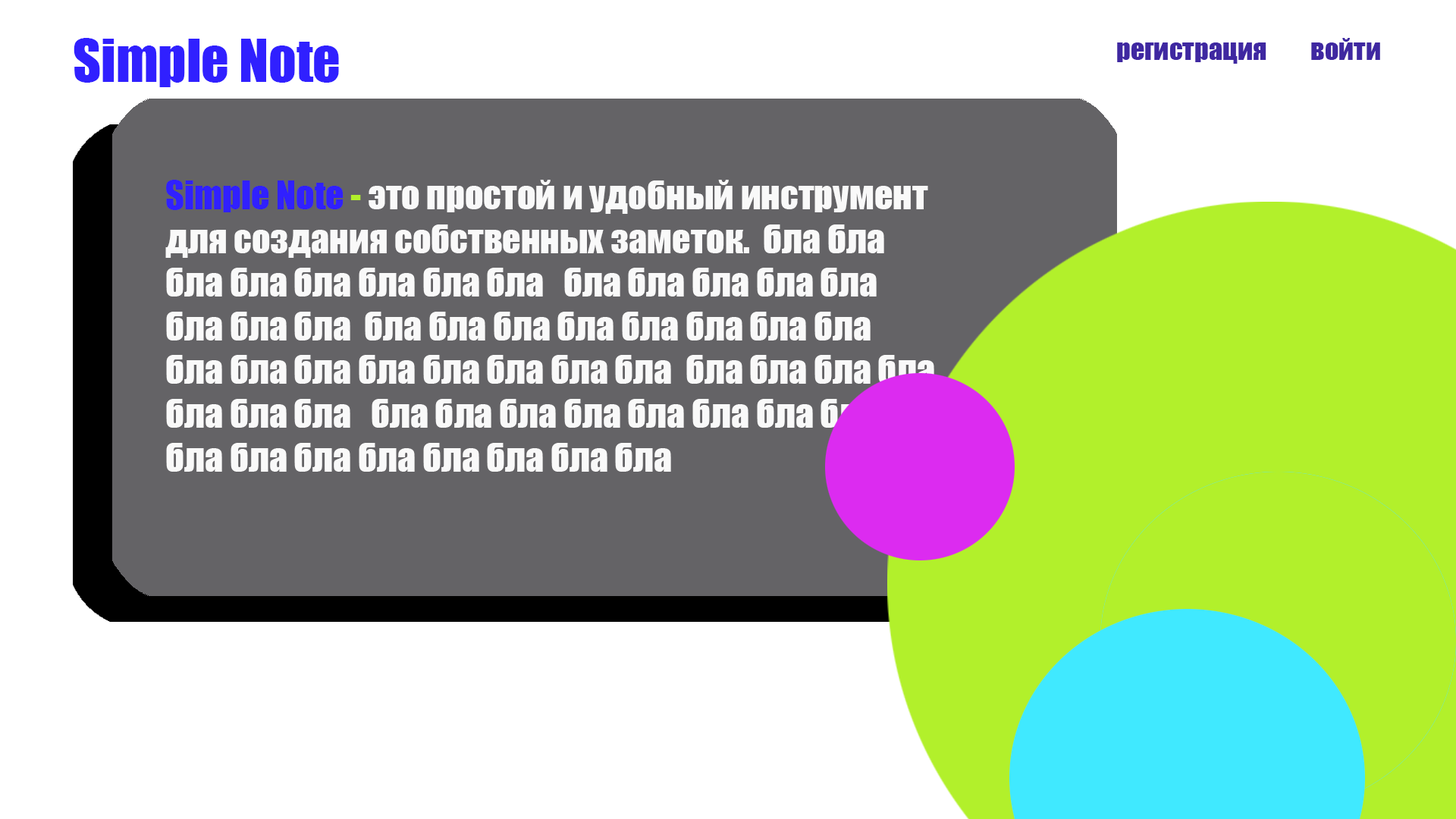
<style>
.page{position:relative;width:1456px;height:819px;background:#ffffff}
.page>*{position:absolute;margin:0}
.t1{font:54.6px "Impact";color:#3020ff}
.t2{font:27.3px "Impact";color:#3f28a1}
.t3{font:36.4px "Impact";color:#f9f9f9}
.t4{font:36.4px "Impact";color:#3020ff}
.t5{font:36.4px "Impact";color:#b2f02b}
</style>
<div class="page">
<p class="t1" style="left:74px;top:38px;width:265px;height:49px">Simple Note</p>
<p class="t2" style="left:1311px;top:38px;width:69px;height:22px">войти</p>
<p class="t3" style="left:165px;top:180px;width:769px;height:292px"><span class="t4">Simple Note</span><span class="t5"> - </span>это простой и удобный инструмент для создания собственных заметок.  бла бла бла бла бла бла бла бла   бла бла бла бла бла бла бла бла  бла бла бла бла бла бла бла бла  бла бла бла бла бла бла бла бла  бла бла бла бла бла бла бла   бла бла бла бла бла бла бла бла  бла бла бла бла бла бла бла бла</p>
</div>
